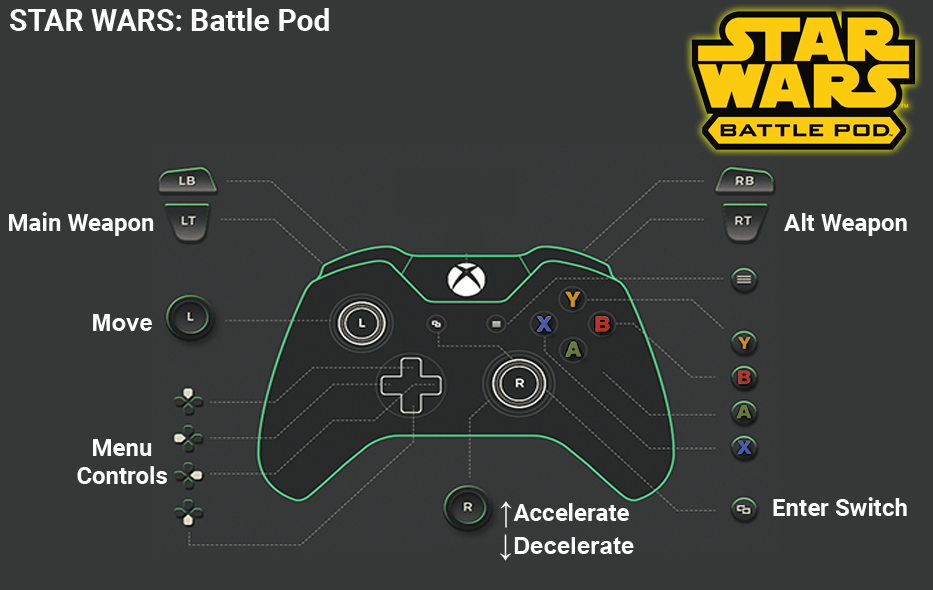
<style>
.page{position:relative;width:933px;height:590px;background:#363838}
.page>*{position:absolute;margin:0}
.t1{font:30px "Roboto-Bold";color:#ffffff}
.t2{font:24px "Roboto-Bold";color:#fefefe}
.t3{font:24px "Arial-BoldMT";color:#fefefe}
.t4{font:24px/28px "Roboto-Bold";color:#fefefe}
.t5{font:30px "ArialMT";color:#fefefe}
.t6{font:30px "Arial-BoldMT";color:#fefefe}
</style>
<div class="page">
<p class="t1" style="left:10px;top:8px;width:319px;height:23px">STAR WARS: Battle Pod</p>
<p class="t2" style="left:9px;top:212px;width:145px;height:24px">Main Weapon</p>
<p class="t2" style="left:784px;top:213px;width:123px;height:23px">Alt Weapon</p>
<p class="t3" style="left:93px;top:314px;width:59px;height:17px">Move</p>
<p class="t4" style="left:77px;top:439px;width:90px;height:45px;text-align:center">Menu<br>Controls</p>
<p class="t2" style="left:773px;top:497px;width:134px;height:19px">Enter Switch</p>
<p class="t2" style="left:500px;top:501px;width:129px;height:27px"><span class="t5">↑</span>Accelerate</p>
<p class="t3" style="left:500px;top:534px;width:134px;height:27px"><span class="t6">↓</span>Decelerate</p>
</div>
